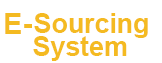
<style>
.page{position:relative;width:162px;height:63px;background:#ffffff}
.page>*{position:absolute;margin:0}
.t1{font:29.3px "Arial-BoldMT";color:#f4ba21}
.t2{font:26.7px "Arial-BoldMT";color:#f4ba21}
</style>
<div class="page">
<p class="t1" style="left:5px;top:13px;width:27px;height:21px">E-</p>
<p class="t2" style="left:34px;top:13px;width:114px;height:25px">Sourcing</p>
<p class="t2" style="left:33px;top:36px;width:94px;height:25px">System</p>
</div>
